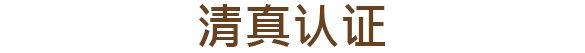
<style>
.page{position:relative;width:585px;height:53px;background:#ffffff}
.page>*{position:absolute;margin:0}
.t1{font:48px "MicrosoftJhengHeiBold";color:#684121}
</style>
<div class="page">
<p class="t1" style="left:199px;top:4px;width:186px;height:43px">清真认证</p>
</div>
